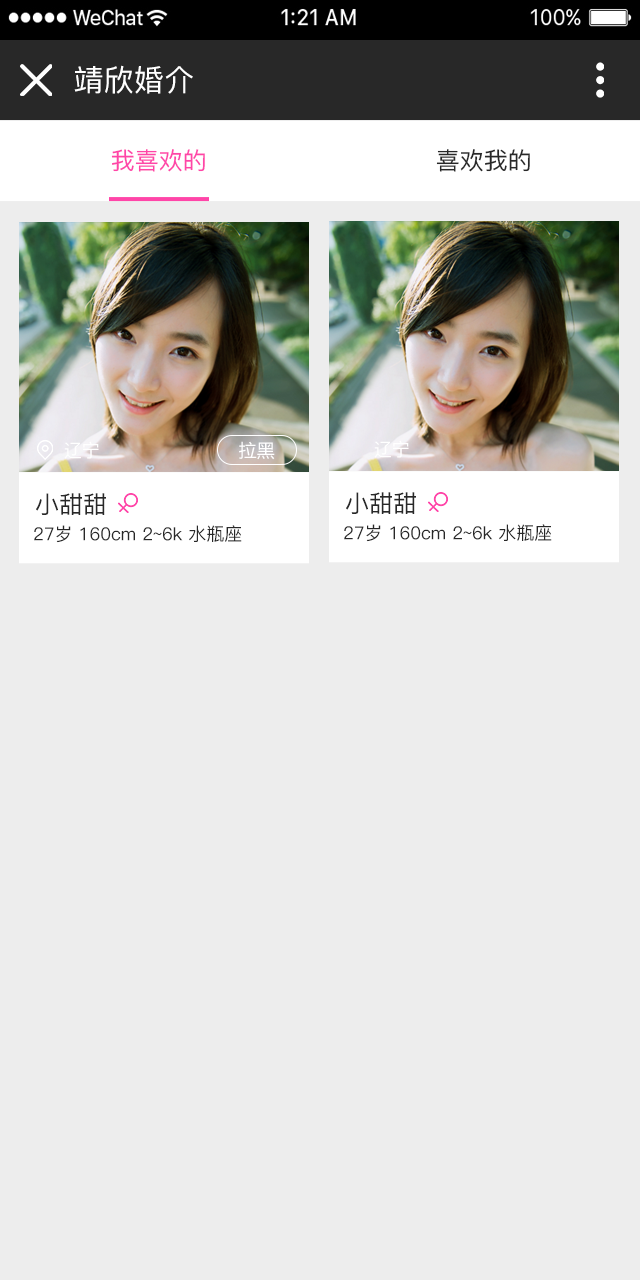
<style>
.page{position:relative;width:640px;height:1280px;background:#ededed}
.page>*{position:absolute;margin:0}
.t1{font:30px "PingFang-SC-Medium";letter-spacing:0.01em;color:#ffffff;text-transform:uppercase}
.t2{font:24px "PingFang-SC-Medium";color:#ff45a8;text-transform:uppercase}
.t3{font:24px "PingFang-SC-Medium";color:#282828;text-transform:uppercase}
.t4{font:18px "PingFang-SC-Medium";color:#ffffff;text-transform:uppercase}
.t5{font:18px "MicrosoftYaHei";letter-spacing:0.01em;color:#ffffff;text-transform:uppercase}
.t6{font:18px "PingFang-SC-Medium";color:#282828}
.t7{font:18px "PingFang-SC-Medium";color:#282828;text-transform:uppercase}
</style>
<div class="page">
<p class="t1" style="left:74px;top:65px;width:119px;height:29px">靖欣婚介</p>
<p class="t2" style="left:111px;top:149px;width:94px;height:23px">我喜欢的</p>
<p class="t3" style="left:436px;top:149px;width:94px;height:23px">喜欢我的</p>
<p class="t4" style="left:64px;top:441px;width:35px;height:18px">辽宁</p>
<p class="t5" style="left:239px;top:441px;width:36px;height:19px">拉黑</p>
<p class="t4" style="left:374px;top:440px;width:35px;height:18px">辽宁</p>
<p class="t3" style="left:36px;top:493px;width:70px;height:22px">小甜甜</p>
<p class="t3" style="left:346px;top:492px;width:70px;height:22px">小甜甜</p>
<p class="t6" style="left:34px;top:525px;width:208px;height:18px"><span class="t7">27岁 160</span>cm 2~6k 水瓶座</p>
<p class="t6" style="left:344px;top:524px;width:208px;height:18px"><span class="t7">27岁 160</span>cm 2~6k 水瓶座</p>
</div>
